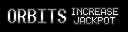
<style>
.page{position:relative;width:128px;height:32px;background:#000000}
.page>*{position:absolute;margin:0}
.t1{font:18px "Terminal"}
.t2{font:10px/9px "Terminal"}
</style>
<div class="page">
<p class="t1" style="left:8px;top:9px;width:58px;height:14px">ORBITS</p>
<p class="t2" style="left:72px;top:8px;width:46px;height:16px;text-align:center">INCREASE<br>JACKPOT</p>
</div>
